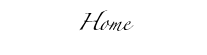
<style>
.page{position:relative;width:207px;height:55px;background:#ffffff}
.page>*{position:absolute;margin:0}
.t1{font:15.3px "Zapfino";color:#000000}
</style>
<div class="page">
<p class="t1" style="left:79px;top:10px;width:55px;height:21px">Home</p>
</div>
